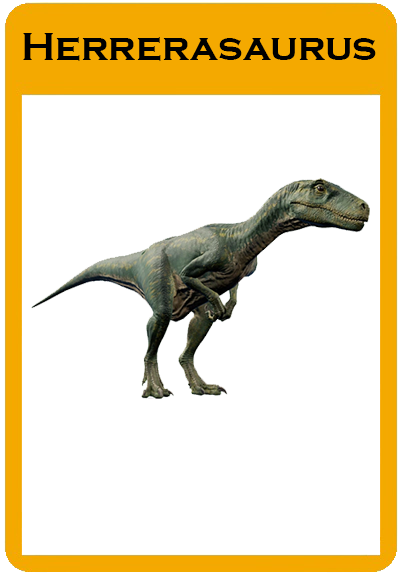
<style>
.page{position:relative;width:400px;height:575px;background:#ffffff}
.page>*{position:absolute;margin:0}
.t1{font:40px "CopperplateGothic-Bold";color:#000000}
</style>
<div class="page">
<p class="t1" style="left:23px;top:33px;width:353px;height:28px">Herrerasaurus</p>
</div>
